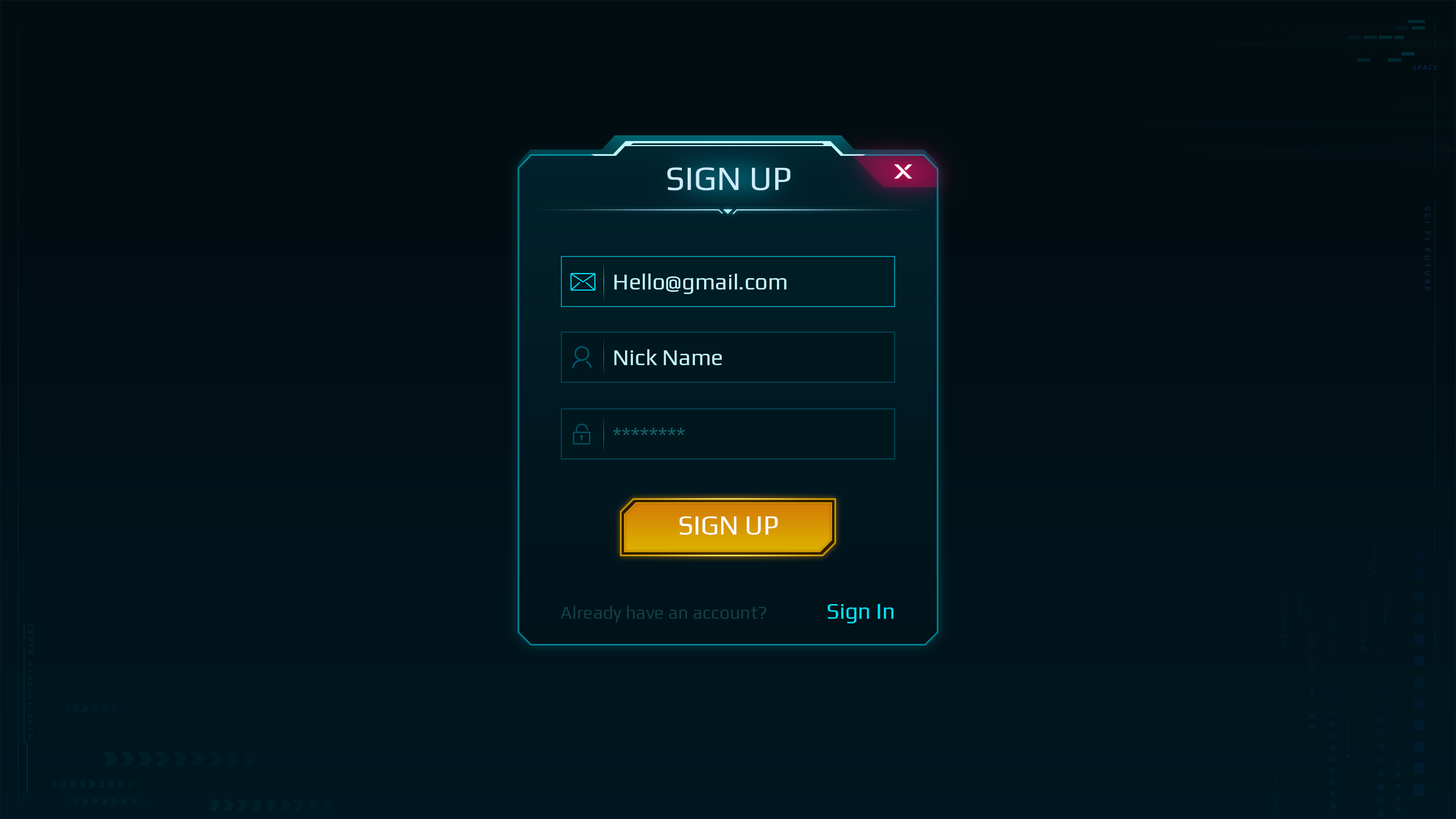
<style>
.page{position:relative;width:1456px;height:819px;background:#020d12}
.page>*{position:absolute;margin:0}
.t1{font:34.1px "Play-Regular";color:#b7ecff}
.t2{font:22.7px "Play-Regular";color:#c5f7ff}
.t3{font:22.7px "Play-Regular";color:#17606d}
.t4{font:27.3px "Play-Regular";color:#ffffff;text-transform:uppercase}
.t5{font:18.2px "Play-Regular";color:#133d46}
.t6{font:22.7px "Play-Regular";color:#00e4ff}
</style>
<div class="page">
<p class="t1" style="left:667px;top:167px;width:124px;height:24px">SIGN UP</p>
<p class="t2" style="left:614px;top:274px;width:173px;height:20px">Hello@gmail.com</p>
<p class="t2" style="left:614px;top:349px;width:108px;height:16px">Nick Name</p>
<p class="t3" style="left:613px;top:428px;width:72px;height:8px">********</p>
<p class="t4" style="left:679px;top:516px;width:99px;height:19px">Sign Up</p>
<p class="t5" style="left:560px;top:606px;width:207px;height:17px">Already have an account?</p>
<p class="t6" style="left:828px;top:604px;width:65px;height:19px">Sign In</p>
</div>
